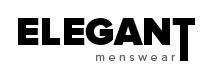
<style>
.page{position:relative;width:206px;height:72px;background:#ffffff}
.page>*{position:absolute;margin:0}
.t1{font:40px "ProximaNova-Black";color:#000000}
.t2{font:12px "ProximaNova-Regular";letter-spacing:0.3em;color:#646464}
</style>
<div class="page">
<p class="t1" style="left:18px;top:18px;width:177px;height:27px">ELEGANT</p>
<p class="t2" style="left:96px;top:55px;width:79px;height:6px">menswear</p>
</div>
